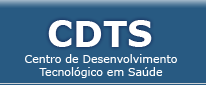
<style>
.page{position:relative;width:206px;height:85px;background:#285a82}
.page>*{position:absolute;margin:0}
.t1{font:36px "Verdana-Bold";color:#ffffff}
.t2{font:11px "Verdana";color:#ffffff}
</style>
<div class="page">
<p class="t1" style="left:48px;top:20px;width:104px;height:27px">CDTS</p>
<p class="t2" style="left:25px;top:54px;width:152px;height:24px;text-align:center">Centro de Desenvolvimento<br>Tecnológico em Saúde</p>
</div>
